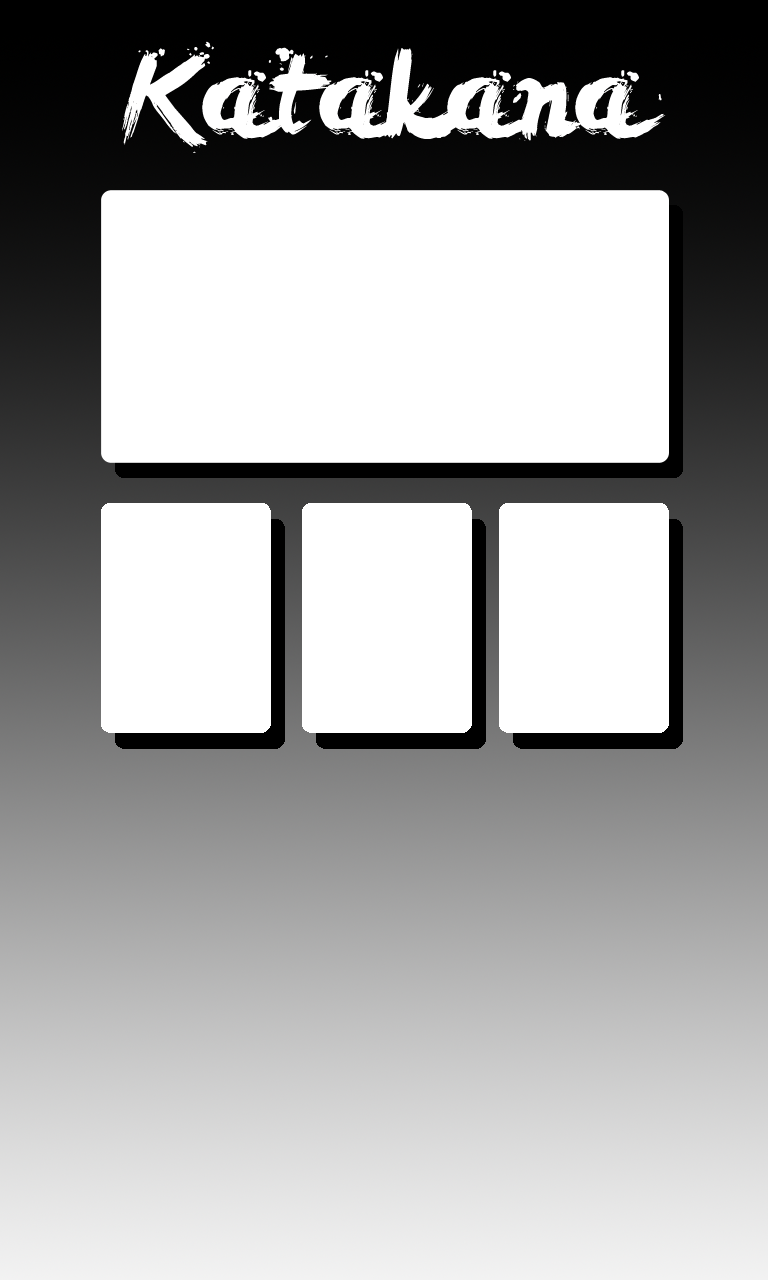
<style>
.page{position:relative;width:768px;height:1280px;background:#ffffff}
.page>*{position:absolute;margin:0}
.t1{font:118.4px "LeviReBrushed";color:#ffffff}
</style>
<div class="page">
<p class="t1" style="left:122px;top:41px;width:544px;height:112px">Katakana</p>
</div>
